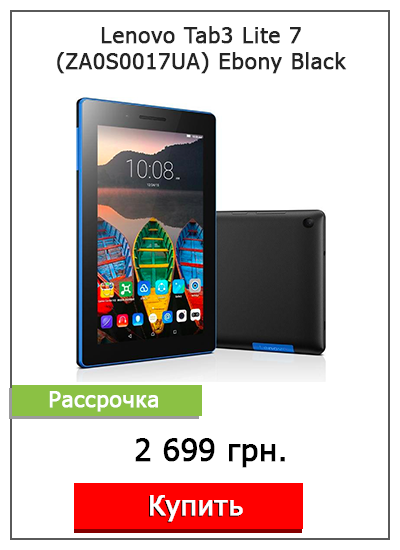
<style>
.page{position:relative;width:400px;height:550px;background:#ffffff}
.page>*{position:absolute;margin:0}
.t1{font:22px/26px "Tahoma";color:#242424;font-weight:bold}
.t2{font:22px "Tahoma";color:#ffffff;font-weight:bold}
.t3{font:31px "Tahoma";color:#000000;font-weight:bold}
.t4{font:28px "Tahoma";color:#ffffff;font-weight:bold}
</style>
<div class="page">
<p class="t1" style="left:57px;top:26px;width:290px;height:48px;text-align:center">Lenovo Tab3 Lite 7 (ZA0S0017UA) Ebony Black</p>
<p class="t2" style="left:49px;top:391px;width:109px;height:21px">Рассрочка</p>
<p class="t3" style="left:135px;top:438px;width:150px;height:30px">2 699 грн.</p>
<p class="t4" style="left:150px;top:495px;width:93px;height:27px">Купить</p>
</div>
